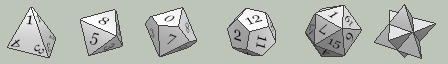
<style>
.page{position:relative;width:448px;height:64px;background:#bdc4b8}
.page>*{position:absolute;margin:0}
.t1{font:17px "Georgia";color:#010000;scale:1.05 1}
.t2{font:13.8px "Georgia";scale:0.65 1}
.t3{font:12.3px "Georgia";color:#191818;scale:1.23 1}
.t4{font:15.2px "Georgia";color:#191818;scale:0.94 1}
.t5{font:14.2px "Georgia";color:#191818;scale:1.11 1}
.t6{font:16px "Georgia";color:#010000}
.t7{font:9.1px "Georgia";color:#161515;scale:1.25 1}
.t8{font:16.2px "Georgia";scale:0.36 1}
.t9{font:12.6px "Georgia";scale:0.49 1}
.t10{font:13.9px "Georgia";scale:0.46 1}
.t11{font:19.7px "Georgia";color:#111010;scale:0.77 1}
.t12{font:9.8px "Georgia";scale:1.38 1}
.t13{font:15px "Georgia";color:#111111}
.t14{font:15.1px "Georgia";color:#151414}
.t15{font:9.7px "Georgia";scale:0.66 1}
.t16{font:17.3px "Georgia";color:#010000;scale:0.87 1}
.t17{font:15.1px "Georgia";color:#010000}
.t18{font:17.3px "Georgia";color:#010000;scale:0.93 1}
.t19{font:10.8px "Georgia";color:#0e0d0d;scale:1.32 1}
.t20{font:11.5px "Georgia";color:#101010;scale:1.29 1}
.t21{font:13.7px "Georgia";color:#151414;scale:1.11 1}
.t22{font:12.3px "Georgia";scale:0.53 1}
.t23{font:16.3px "Georgia";scale:0.5 1}
.t24{font:10.8px "Georgia";color:#010000;scale:0.9 1}
.t25{font:7.8px "Georgia";color:#010000;scale:1.88 1}
</style>
<div class="page">
<p class="t1" style="left:26px;top:15px;width:7px;height:10px;rotate:4deg">1</p>
<p class="t2" style="left:36px;top:14px;width:6px;height:9px;rotate:-32deg">1</p>
<p class="t3" style="left:98px;top:17px;width:12px;height:8px;rotate:24deg">8</p>
<p class="t4" style="left:164px;top:15px;width:11px;height:7px;rotate:14deg">0</p>
<p class="t5" style="left:245px;top:15px;width:18px;height:10px;rotate:-16deg">12</p>
<p class="t6" style="left:328px;top:11px;width:11px;height:8px;rotate:32deg">1</p>
<p class="t7" style="left:345px;top:16px;width:9px;height:11px;rotate:-127deg">19</p>
<p class="t8" style="left:117px;top:24px;width:4px;height:12px;rotate:25deg">3</p>
<p class="t9" style="left:150px;top:28px;width:5px;height:10px;rotate:9deg">3</p>
<p class="t10" style="left:185px;top:22px;width:5px;height:11px;rotate:-180deg">8</p>
<p class="t11" style="left:234px;top:29px;width:7px;height:13px;rotate:18deg">2</p>
<p class="t12" style="left:308px;top:24px;width:7px;height:12px;rotate:-79deg">17</p>
<p class="t13" style="left:318px;top:24px;width:10px;height:11px;rotate:-147deg">7</p>
<p class="t14" style="left:10px;top:39px;width:10px;height:8px;rotate:-127deg">4</p>
<p class="t15" style="left:49px;top:35px;width:6px;height:5px;rotate:106deg">2</p>
<p class="t16" style="left:90px;top:32px;width:9px;height:13px;rotate:13deg">5</p>
<p class="t17" style="left:167px;top:34px;width:10px;height:11px;rotate:21deg">7</p>
<p class="t18" style="left:256px;top:35px;width:11px;height:13px;rotate:100deg">11</p>
<p class="t19" style="left:327px;top:38px;width:14px;height:11px;rotate:23deg">15</p>
<p class="t20" style="left:346px;top:32px;width:7px;height:10px;rotate:-57deg">9</p>
<p class="t21" style="left:34px;top:44px;width:10px;height:10px;rotate:134deg">3</p>
<p class="t22" style="left:47px;top:42px;width:4px;height:10px;rotate:179deg">3</p>
<p class="t23" style="left:103px;top:43px;width:12px;height:8px;rotate:91deg">3</p>
<p class="t24" style="left:242px;top:50px;width:10px;height:5px;rotate:40deg">8</p>
<p class="t25" style="left:322px;top:49px;width:8px;height:6px;rotate:-161deg">4</p>
</div>
